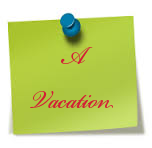
<style>
.page{position:relative;width:152px;height:148px;background:#ffffff}
.page>*{position:absolute;margin:0}
.t1{font:36px "BickhamScriptPro-Regular";color:#d31f34}
</style>
<div class="page">
<p class="t1" style="left:30px;top:47px;width:83px;height:61px;text-align:center">A<br>Vacation</p>
</div>
